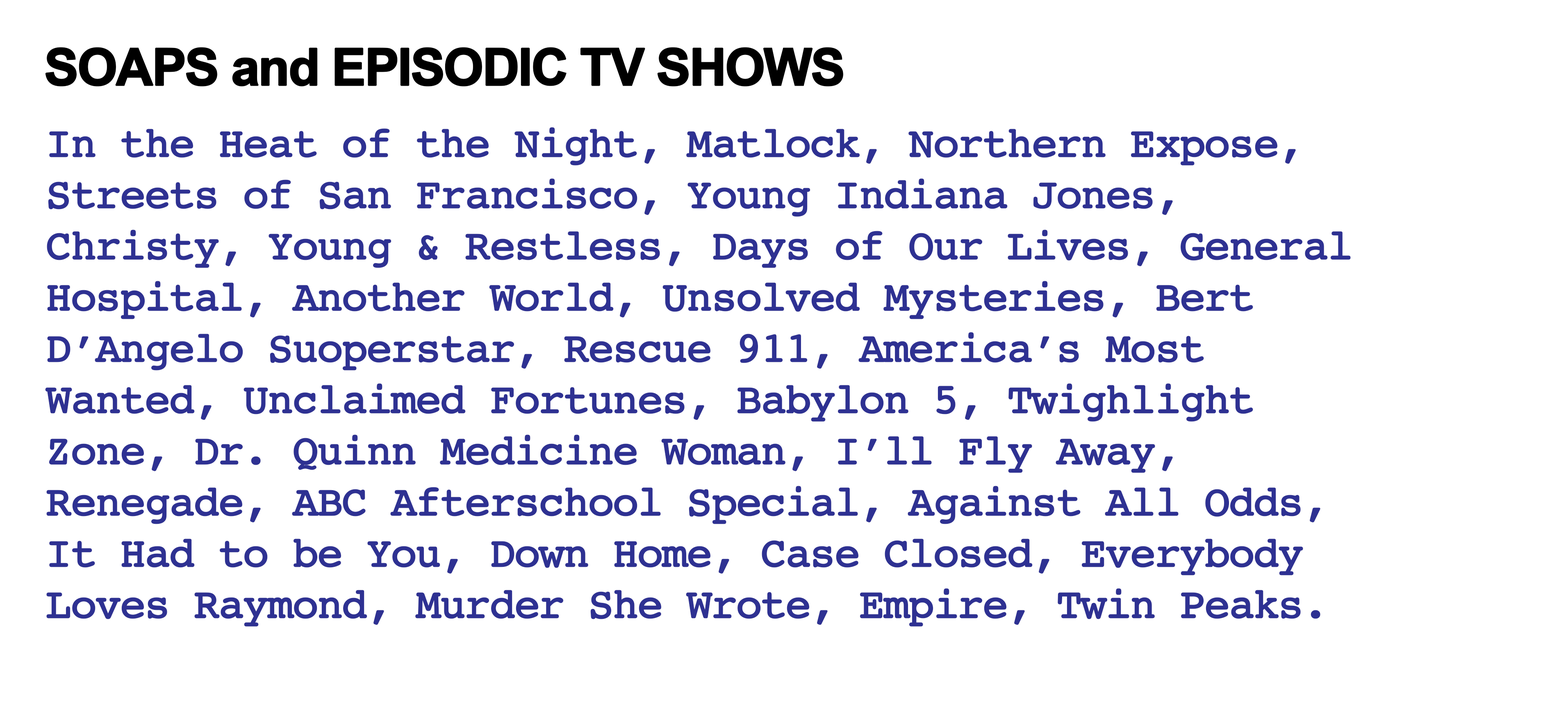
<style>
.page{position:relative;width:1568px;height:723px;background:#ffffff}
.page>*{position:absolute;margin:0}
.t1{font:51.2px "Arial-BoldMT";letter-spacing:-0.05em;color:#000000;font-weight:bold}
.t2{font:42.7px "Courier";letter-spacing:-0.05em;color:#2e3192;font-weight:bold}
</style>
<div class="page">
<p class="t1" style="left:45px;top:47px;width:798px;height:39px">SOAPS and EPISODIC TV SHOWS</p>
<p class="t2" style="left:45px;top:127px;width:1306px;height:500px">In the Heat of the Night, Matlock, Northern Expose, Streets of San Francisco, Young Indiana Jones, Christy, Young &amp; Restless, Days of Our Lives, General Hospital, Another World, Unsolved Mysteries, Bert D’Angelo Suoperstar, Rescue 911, America’s Most Wanted, Unclaimed Fortunes, Babylon 5, Twighlight Zone, Dr. Quinn Medicine Woman, I’ll Fly Away, Renegade, ABC Afterschool Special, Against All Odds, It Had to be You, Down Home, Case Closed, Everybody Loves Raymond, Murder She Wrote, Empire, Twin Peaks.</p>
</div>
